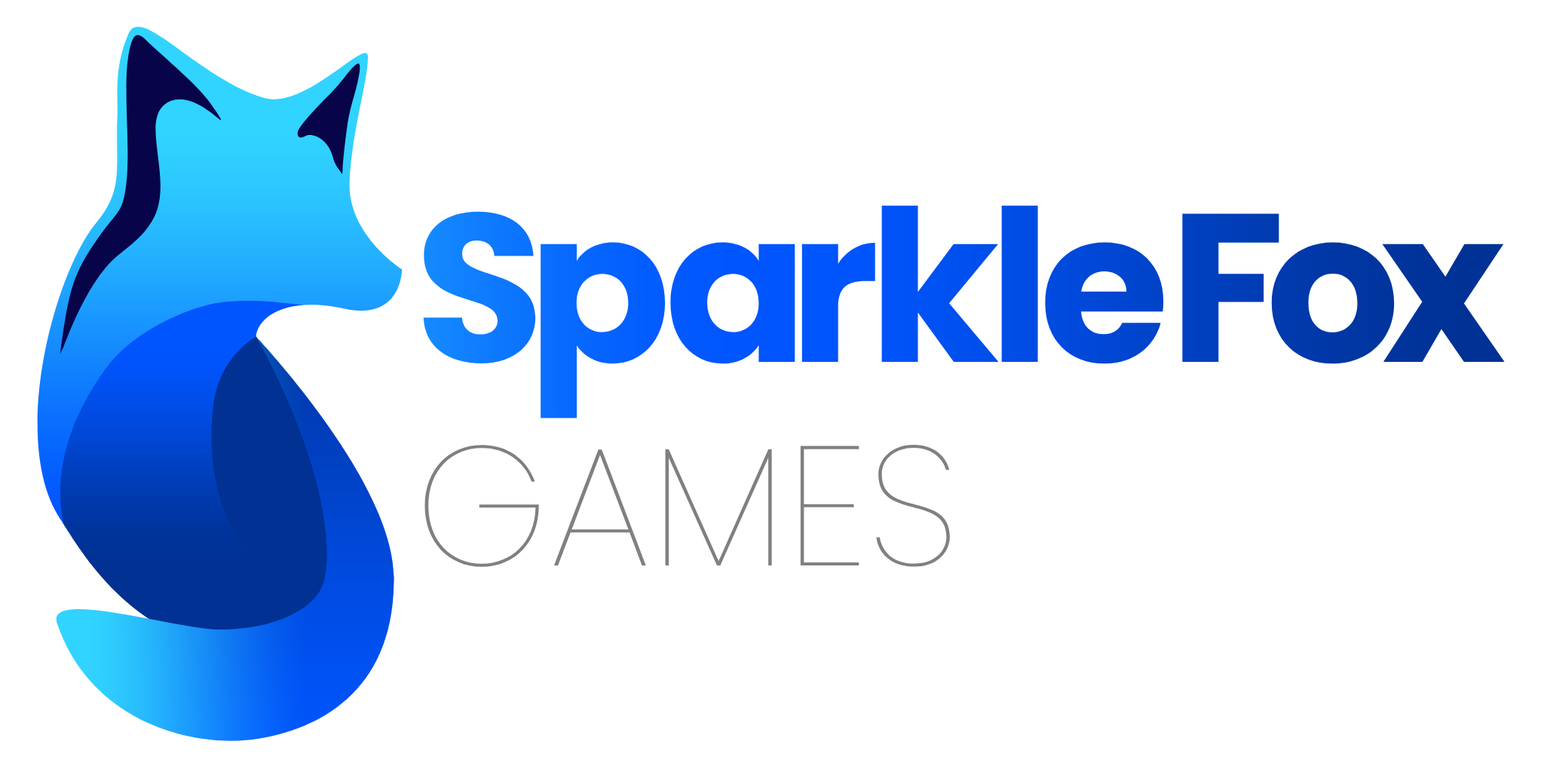
<style>
.page{position:relative;width:1544px;height:772px;background:#ffffff}
.page>*{position:absolute;margin:0}
.t1{font:169.7px "Poppins-Thin"}
.t2{font:211.1px "Poppins-Bold";letter-spacing:-0.08em}
.t3{font:211.1px "Poppins-Bold";letter-spacing:-0.03em}
.t4{font:211.1px "Poppins-Bold";letter-spacing:-0.09em}
.t5{font:211.1px "Poppins-Bold";letter-spacing:-0.05em}
.t6{font:211.1px "Poppins-Bold";letter-spacing:-0.055em}
.t7{font:211.1px "Poppins-Bold"}
</style>
<div class="page">
<p class="t1" style="left:423px;top:205px;width:1082px;height:362px"><span class="t2">S</span><span class="t3">p</span><span class="t4">a</span><span class="t5">rk</span><span class="t6">l</span><span class="t7">e</span><span class="t4">Fox<br></span>GAMES</p>
</div>
